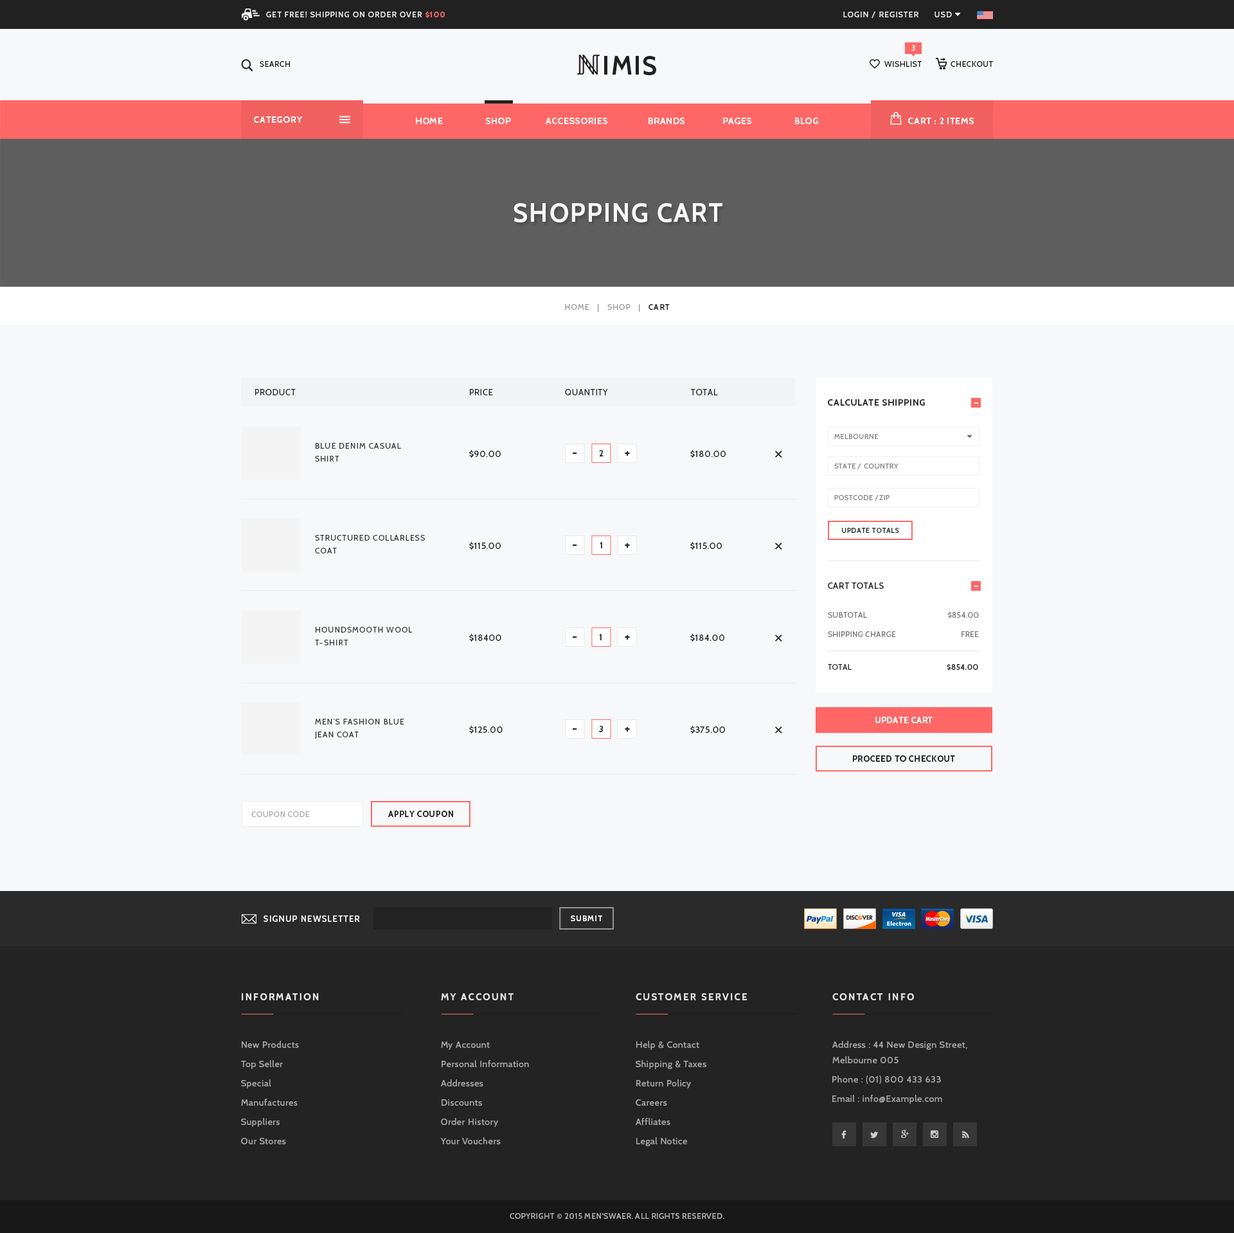
<style>
.page{position:relative;width:1234px;height:1233px;background:#f7f8f9}
.page>*{position:absolute;margin:0}
.t1{font:7.7px "Cabin-Medium";letter-spacing:0.1em;color:#e8e8e8;text-transform:uppercase}
.t2{font:7.7px "Cabin-Bold";letter-spacing:0.1em;color:#ff6766;text-transform:uppercase}
.t3{font:7.7px "Cabin-SemiBold";letter-spacing:0.05em;color:#ffffff;text-transform:uppercase}
.t4{font:7.7px "Cabin-Medium";letter-spacing:0.05em;color:#212121;text-transform:uppercase}
.t5{font:25.7px "Cabin-Bold";letter-spacing:0.05em;color:#212121;text-transform:uppercase}
.t6{font:9px "Cabin-Bold";letter-spacing:0.05em;color:#ffffff;text-transform:uppercase}
.t7{font:25.7px "Cabin-Bold";letter-spacing:0.05em;color:#f7f8f9;text-transform:uppercase}
.t8{font:7.7px "Cabin-Regular";letter-spacing:0.1em;color:#999999;text-transform:uppercase}
.t9{font:7.7px "Cabin-SemiBold";letter-spacing:0.1em;color:#212121;text-transform:uppercase}
.t10{font:8.4px "Cabin-Regular";letter-spacing:0.06em;color:#232323;text-transform:uppercase}
.t11{font:9px "Cabin-Bold";letter-spacing:0.05em;color:#232323}
.t12{font:12.2px "Cabin-Regular";letter-spacing:0.1em;color:#ffffff;text-transform:uppercase}
.t13{font:7.1px "Cabin-Regular";letter-spacing:0.05em;color:#888888;text-transform:uppercase}
.t14{font:7.7px/12.9px "Cabin-Regular";letter-spacing:0.1em;color:#333333;text-transform:uppercase}
.t15{font:9px "Cabin-Regular";letter-spacing:0.03em;color:#212121;text-transform:uppercase}
.t16{font:12.9px "Cabin-Bold";letter-spacing:0.03em;color:#232323}
.t17{font:8.4px "Cabin-Bold";letter-spacing:0.03em;color:#232323}
.t18{font:7.1px "Cabin-Medium";letter-spacing:0.05em;color:#232323;text-transform:uppercase}
.t19{font:8.4px "Cabin-Medium";letter-spacing:0.05em;color:#212121;text-transform:uppercase}
.t20{font:7.7px "Cabin-Regular";letter-spacing:0.03em;color:#777777;text-transform:uppercase}
.t21{font:7.7px "Cabin-Regular";letter-spacing:0.03em;color:#212121;text-transform:uppercase}
.t22{font:7.7px "Cabin-SemiBold";letter-spacing:0.03em;color:#212121;text-transform:uppercase}
.t23{font:8.4px "Cabin-Bold";letter-spacing:0.05em;color:#ffffff;text-transform:uppercase}
.t24{font:8.4px "Cabin-Bold";letter-spacing:0.05em;color:#232323;text-transform:uppercase}
.t25{font:7.7px "Cabin-Regular";letter-spacing:0.05em;color:#aaaaaa;text-transform:uppercase}
.t26{font:8.4px "Cabin-Medium";letter-spacing:0.1em;color:#ffffff;text-transform:uppercase}
.t27{font:7.7px "Cabin-SemiBold";letter-spacing:0.1em;color:#ffffff;text-transform:uppercase}
.t28{font:9.6px "Cabin-Bold";letter-spacing:0.15em;color:#eeeeee;text-transform:uppercase}
.t29{font:9.6px "Cabin-Bold";letter-spacing:0.15em;color:#e8e8e8;text-transform:uppercase}
.t30{font:9px "Cabin-Regular";letter-spacing:0.05em;color:#aaaaaa}
.t31{font:9px/15.4px "Cabin-Regular";letter-spacing:0.05em;color:#aaaaaa}
.t32{font:7.7px "Cabin-Medium";letter-spacing:0.05em;color:#aaaaaa;text-transform:uppercase}
</style>
<div class="page">
<p class="t1" style="left:266px;top:12px;width:179px;height:6px">get free! shipping on order over <span class="t2">$100</span></p>
<p class="t1" style="left:843px;top:12px;width:76px;height:6px">login / register</p>
<p class="t3" style="left:912px;top:45px;width:3px;height:6px">3</p>
<p class="t4" style="left:260px;top:61px;width:30px;height:6px">search</p>
<p class="t5" style="left:604px;top:56px;width:52px;height:19px">imis</p>
<p class="t4" style="left:885px;top:61px;width:37px;height:6px">wishlist</p>
<p class="t4" style="left:951px;top:61px;width:42px;height:6px">checkout</p>
<p class="t6" style="left:254px;top:116px;width:48px;height:7px">category</p>
<p class="t6" style="left:416px;top:118px;width:402px;height:6px">home                 shop              accessories                brands               pages                 Blog</p>
<p class="t6" style="left:908px;top:118px;width:66px;height:6px">cart : 2 items</p>
<p class="t7" style="left:514px;top:203px;width:209px;height:19px">shopping cart</p>
<p class="t8" style="left:565px;top:304px;width:105px;height:8px">home   |   Shop   |   <span class="t9">cart</span></p>
<p class="t10" style="left:255px;top:389px;width:41px;height:6px">product</p>
<p class="t10" style="left:470px;top:389px;width:23px;height:6px">price</p>
<p class="t10" style="left:565px;top:389px;width:43px;height:6px">quantity</p>
<p class="t10" style="left:691px;top:389px;width:27px;height:6px">total</p>
<p class="t11" style="left:828px;top:399px;width:97px;height:7px">CALCULATE SHIPPING</p>
<p class="t12" style="left:975px;top:402px;width:3px;height:2px">-</p>
<p class="t13" style="left:834px;top:434px;width:44px;height:5px">melbourne</p>
<p class="t14" style="left:315px;top:443px;width:86px;height:19px">blue denim casual <br>shirt</p>
<p class="t15" style="left:469px;top:450px;width:32px;height:8px">$90.00</p>
<p class="t16" style="left:573px;top:453px;width:4px;height:1px">-</p>
<p class="t17" style="left:599px;top:450px;width:5px;height:6px">2</p>
<p class="t16" style="left:625px;top:451px;width:5px;height:5px">+</p>
<p class="t15" style="left:690px;top:450px;width:36px;height:8px">$180.00</p>
<p class="t13" style="left:834px;top:464px;width:65px;height:5px">state / Country</p>
<p class="t13" style="left:834px;top:495px;width:56px;height:6px">postcode /zip</p>
<p class="t18" style="left:842px;top:528px;width:57px;height:5px">Update totals</p>
<p class="t14" style="left:315px;top:535px;width:110px;height:19px">structured collarless <br>coat</p>
<p class="t15" style="left:469px;top:542px;width:32px;height:8px">$115.00</p>
<p class="t16" style="left:573px;top:544px;width:4px;height:2px">-</p>
<p class="t17" style="left:600px;top:542px;width:2px;height:6px">1</p>
<p class="t16" style="left:625px;top:543px;width:5px;height:5px">+</p>
<p class="t15" style="left:690px;top:542px;width:32px;height:8px">$115.00</p>
<p class="t19" style="left:828px;top:582px;width:56px;height:7px">CArt totals</p>
<p class="t12" style="left:975px;top:586px;width:3px;height:1px">-</p>
<p class="t20" style="left:828px;top:612px;width:39px;height:6px">SubTotal</p>
<p class="t20" style="left:948px;top:612px;width:31px;height:6px">$854.00</p>
<p class="t14" style="left:315px;top:627px;width:98px;height:18px">houndsmooth wool <br>t-shirt</p>
<p class="t15" style="left:469px;top:634px;width:32px;height:8px">$18400</p>
<p class="t16" style="left:573px;top:636px;width:4px;height:2px">-</p>
<p class="t17" style="left:599px;top:634px;width:3px;height:6px">1</p>
<p class="t16" style="left:625px;top:635px;width:5px;height:5px">+</p>
<p class="t15" style="left:690px;top:634px;width:34px;height:8px">$184.00</p>
<p class="t20" style="left:828px;top:631px;width:68px;height:6px">Shipping Charge</p>
<p class="t20" style="left:962px;top:631px;width:17px;height:6px">Free</p>
<p class="t21" style="left:828px;top:664px;width:24px;height:6px">total</p>
<p class="t22" style="left:947px;top:664px;width:31px;height:6px">$854.00</p>
<p class="t14" style="left:314px;top:719px;width:90px;height:20px">men’s fashion blue <br>jean coat</p>
<p class="t15" style="left:469px;top:726px;width:34px;height:8px">$125.00</p>
<p class="t17" style="left:599px;top:726px;width:4px;height:6px">3</p>
<p class="t15" style="left:690px;top:726px;width:35px;height:8px">$375.00</p>
<p class="t23" style="left:876px;top:717px;width:57px;height:6px">update cart</p>
<p class="t16" style="left:573px;top:728px;width:4px;height:2px">-</p>
<p class="t16" style="left:625px;top:727px;width:5px;height:5px">+</p>
<p class="t24" style="left:853px;top:755px;width:102px;height:7px">Proceed to checkout</p>
<p class="t25" style="left:251px;top:811px;width:59px;height:6px">coupon code</p>
<p class="t24" style="left:388px;top:811px;width:65px;height:6px">apply coupon</p>
<p class="t26" style="left:264px;top:915px;width:96px;height:7px">signup newsletter</p>
<p class="t27" style="left:571px;top:915px;width:31px;height:6px">Submit</p>
<p class="t28" style="left:242px;top:993px;width:77px;height:7px">information</p>
<p class="t29" style="left:441px;top:993px;width:73px;height:7px">my account</p>
<p class="t29" style="left:636px;top:993px;width:112px;height:7px">customer service</p>
<p class="t29" style="left:833px;top:993px;width:81px;height:7px">contact Info</p>
<p class="t30" style="left:242px;top:1041px;width:57px;height:7px">New Products</p>
<p class="t30" style="left:441px;top:1041px;width:49px;height:9px">My Account</p>
<p class="t30" style="left:636px;top:1041px;width:63px;height:9px">Help &amp; Contact</p>
<p class="t31" style="left:833px;top:1041px;width:135px;height:22px">Address : 44 New Design Street,<br>Melbourne 005</p>
<p class="t30" style="left:241px;top:1060px;width:42px;height:9px">Top Seller</p>
<p class="t30" style="left:442px;top:1060px;width:87px;height:7px">Personal Information</p>
<p class="t30" style="left:636px;top:1060px;width:70px;height:9px">Shipping &amp; Taxes</p>
<p class="t30" style="left:241px;top:1079px;width:30px;height:9px">Special</p>
<p class="t30" style="left:441px;top:1079px;width:42px;height:7px">Addresses</p>
<p class="t30" style="left:636px;top:1079px;width:55px;height:9px">Return Policy</p>
<p class="t30" style="left:833px;top:1076px;width:108px;height:8px">Phone : (01) 800 433 633</p>
<p class="t30" style="left:833px;top:1095px;width:109px;height:9px">Email : info@Example.com</p>
<p class="t30" style="left:241px;top:1099px;width:57px;height:7px">Manufactures</p>
<p class="t30" style="left:442px;top:1099px;width:40px;height:7px">Discounts</p>
<p class="t30" style="left:636px;top:1099px;width:31px;height:7px">Careers</p>
<p class="t30" style="left:241px;top:1118px;width:39px;height:9px">Suppliers</p>
<p class="t30" style="left:441px;top:1118px;width:57px;height:9px">Order History</p>
<p class="t30" style="left:636px;top:1118px;width:34px;height:7px">Affliates</p>
<p class="t30" style="left:241px;top:1138px;width:45px;height:6px">Our Stores</p>
<p class="t30" style="left:440px;top:1137px;width:61px;height:7px">Your Vouchers</p>
<p class="t30" style="left:636px;top:1137px;width:51px;height:9px">Legal Notice</p>
<p class="t32" style="left:510px;top:1213px;width:214px;height:6px">Copyright © 2015 Men’swaer. All Rights Reserved.</p>
</div>
